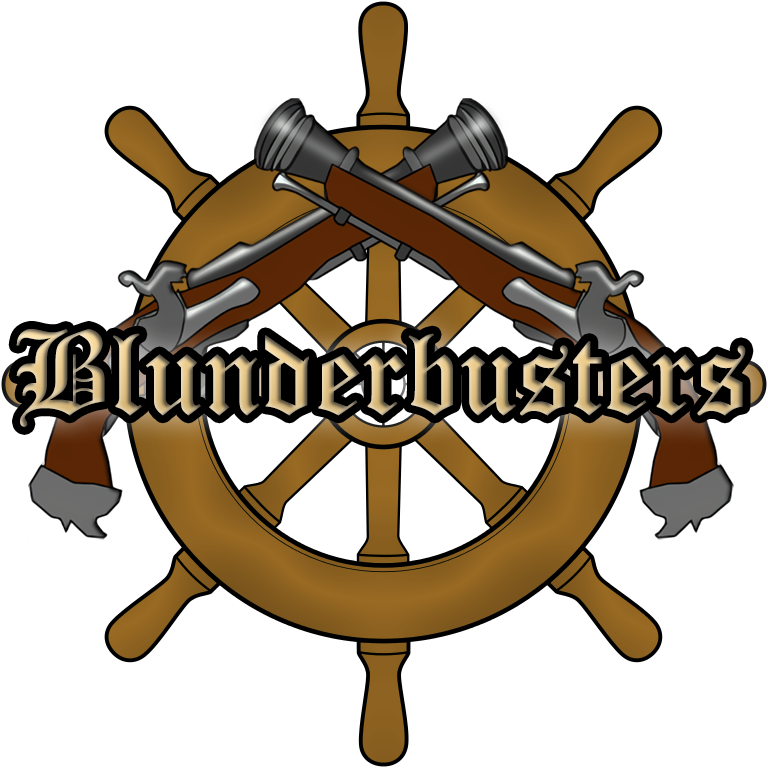
<style>
.page{position:relative;width:768px;height:768px;background:#ffffff}
.page>*{position:absolute;margin:0}
.t1{font:116.4px "OldEnglishTextMT"}
</style>
<div class="page">
<p class="t1" style="left:16px;top:329px;width:730px;height:98px">Blunderbusters</p>
</div>
